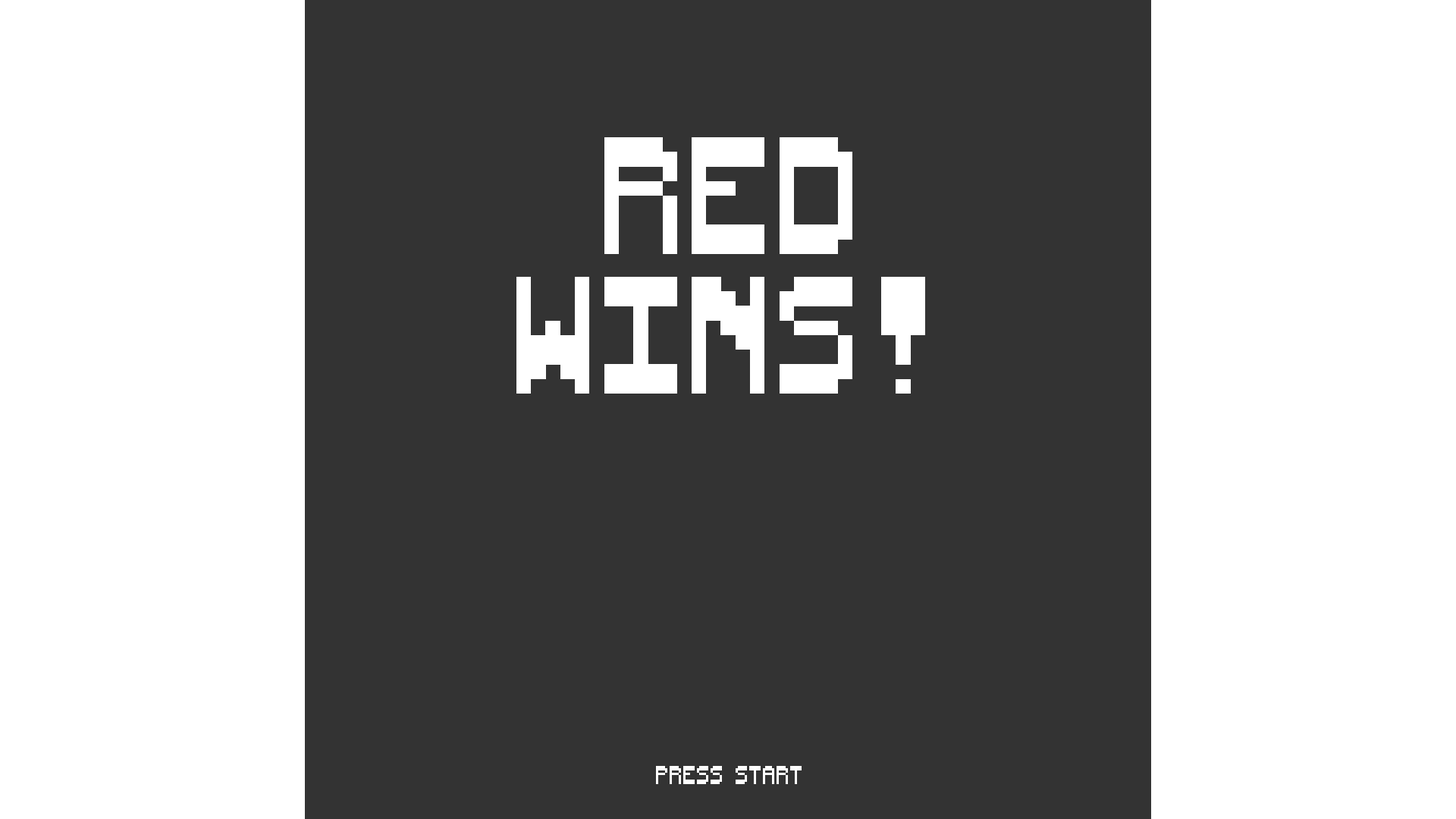
<style>
.page{position:relative;width:1456px;height:819px;background:#333333}
.page>*{position:absolute;margin:0}
.t1{font:116.8px "WildBillYonder";color:#ffffff}
.t2{font:18.2px "WildBillYonder";color:#ffffff}
</style>
<div class="page">
<p class="t1" style="left:516px;top:137px;width:409px;height:257px;text-align:center">RED<br>WINS!</p>
<p class="t2" style="left:656px;top:766px;width:146px;height:18px">press start</p>
</div>
